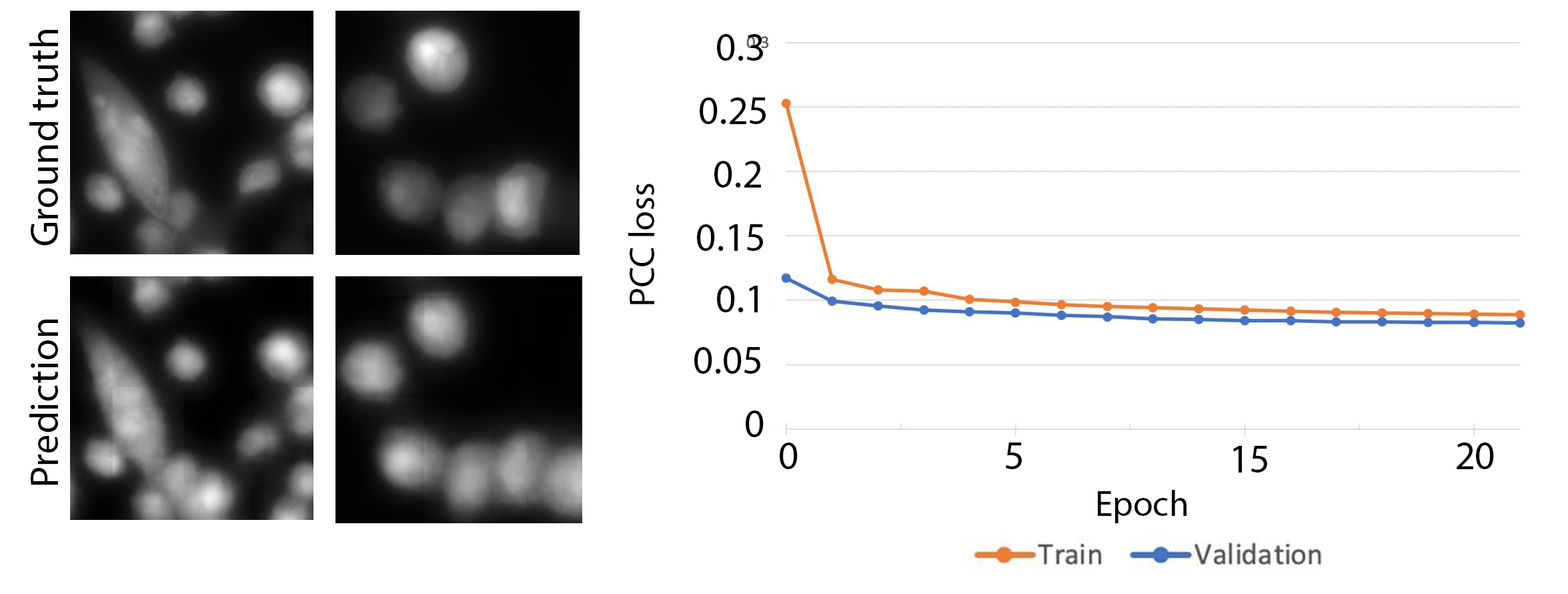
<style>
.page{position:relative;width:1568px;height:594px;background:#ffffff}
.page>*{position:absolute;margin:0}
.t1{font:40px "MyriadPro-Regular";color:#000000}
.t2{font:36px "MyriadPro-Regular";color:#000000}
</style>
<div class="page">
<p class="t1" style="left:29px;top:29px;width:29px;height:216px;rotate:-90deg">Ground truth</p>
<p class="t1" style="left:717px;top:34px;width:46px;height:27px">0.3</p>
<p class="t1" style="left:700px;top:97px;width:66px;height:27px">0.25</p>
<p class="t1" style="left:714px;top:161px;width:47px;height:26px">0.2</p>
<p class="t2" style="left:628px;top:183px;width:26px;height:121px;rotate:-90deg">PCC loss</p>
<p class="t1" style="left:697px;top:224px;width:66px;height:27px">0.15</p>
<p class="t1" style="left:717px;top:285px;width:41px;height:27px">0.1</p>
<p class="t1" style="left:29px;top:319px;width:29px;height:166px;rotate:-90deg">Prediction</p>
<p class="t1" style="left:694px;top:347px;width:66px;height:26px">0.05</p>
<p class="t1" style="left:746px;top:410px;width:18px;height:27px">0</p>
<p class="t1" style="left:780px;top:442px;width:18px;height:27px">0</p>
<p class="t1" style="left:1005px;top:442px;width:17px;height:27px">5</p>
<p class="t1" style="left:1233px;top:446px;width:34px;height:26px">15</p>
<p class="t1" style="left:1457px;top:442px;width:37px;height:27px">20</p>
<p class="t2" style="left:1098px;top:490px;width:89px;height:33px">Epoch</p>
</div>
